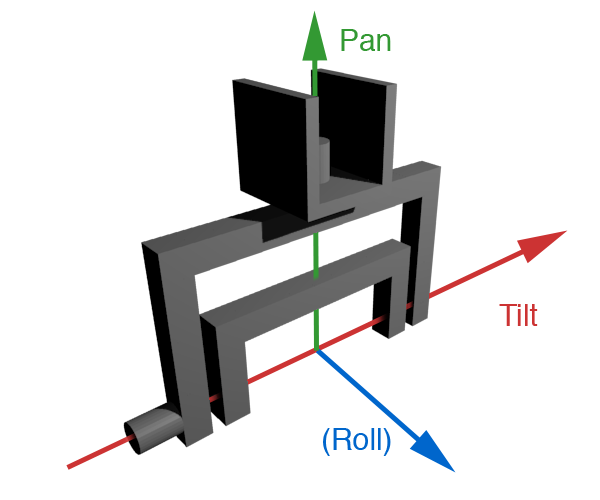
<style>
.page{position:relative;width:600px;height:500px;background:#ffffff}
.page>*{position:absolute;margin:0}
.t1{font:30px "Helvetica";color:#339933}
.t2{font:30px "Helvetica";color:#cc3333}
.t3{font:30px "Helvetica";color:#0066cc}
</style>
<div class="page">
<p class="t1" style="left:341px;top:29px;width:50px;height:22px">Pan</p>
<p class="t2" style="left:499px;top:304px;width:39px;height:22px">Tilt</p>
<p class="t3" style="left:323px;top:428px;width:68px;height:28px">(Roll)</p>
</div>
